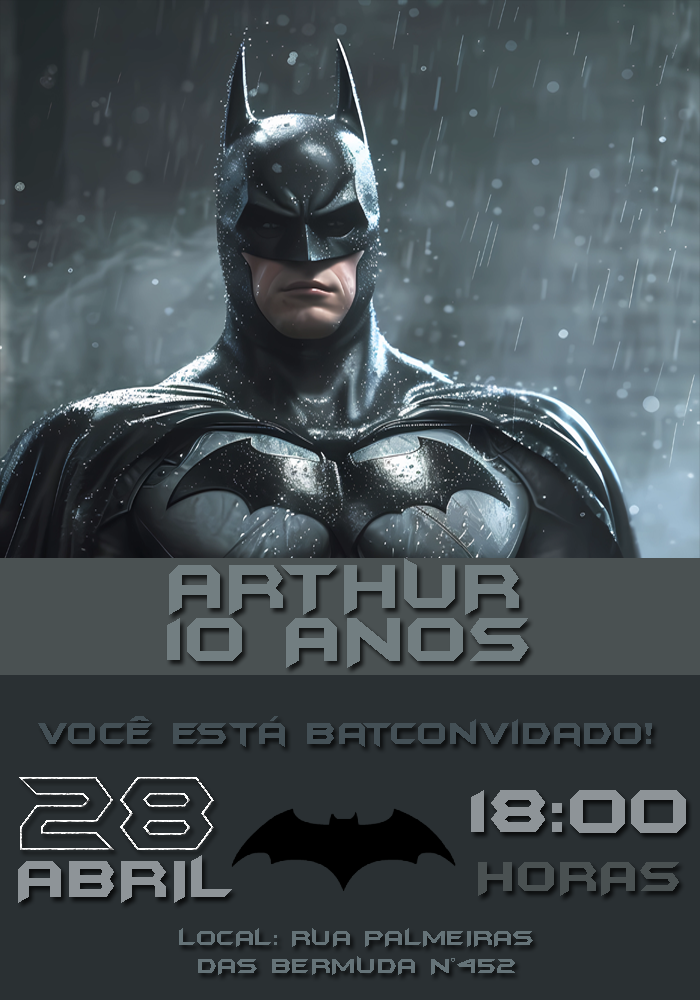
<style>
.page{position:relative;width:700px;height:1000px;background:#2a3033}
.page>*{position:absolute;margin:0}
.t1{font:72px "BatmanForeverAlternate";color:#727e81}
.t2{font:36px "BatmanForeverAlternate";color:#445056}
.t3{font:120px "BatmanForeverOutline";color:#ffffff}
.t4{font:72px "BatmanForeverAlternate";color:#8e9498}
.t5{font:60px "BatmanForeverAlternate";color:#8e9498}
.t6{font:48px "BatmanForeverAlternate";color:#4a5152}
.t7{font:24px "BatmanForeverAlternate";color:#657378}
</style>
<div class="page">
<p class="t1" style="left:169px;top:558px;width:350px;height:57px">ARTHUR</p>
<p class="t1" style="left:167px;top:618px;width:362px;height:50px">10 ANOS</p>
<p class="t2" style="left:38px;top:716px;width:614px;height:31px">você está batconvidado!</p>
<p class="t3" style="left:19px;top:777px;width:195px;height:73px">28</p>
<p class="t4" style="left:471px;top:790px;width:215px;height:43px">18:00</p>
<p class="t5" style="left:18px;top:855px;width:214px;height:48px">ABRIL</p>
<p class="t6" style="left:478px;top:862px;width:201px;height:34px">HORAS</p>
<p class="t7" style="left:179px;top:928px;width:354px;height:47px;text-align:center">LOCAL: RUA PALMEIRAS<br>DAS BERMUDA N°452</p>
</div>
